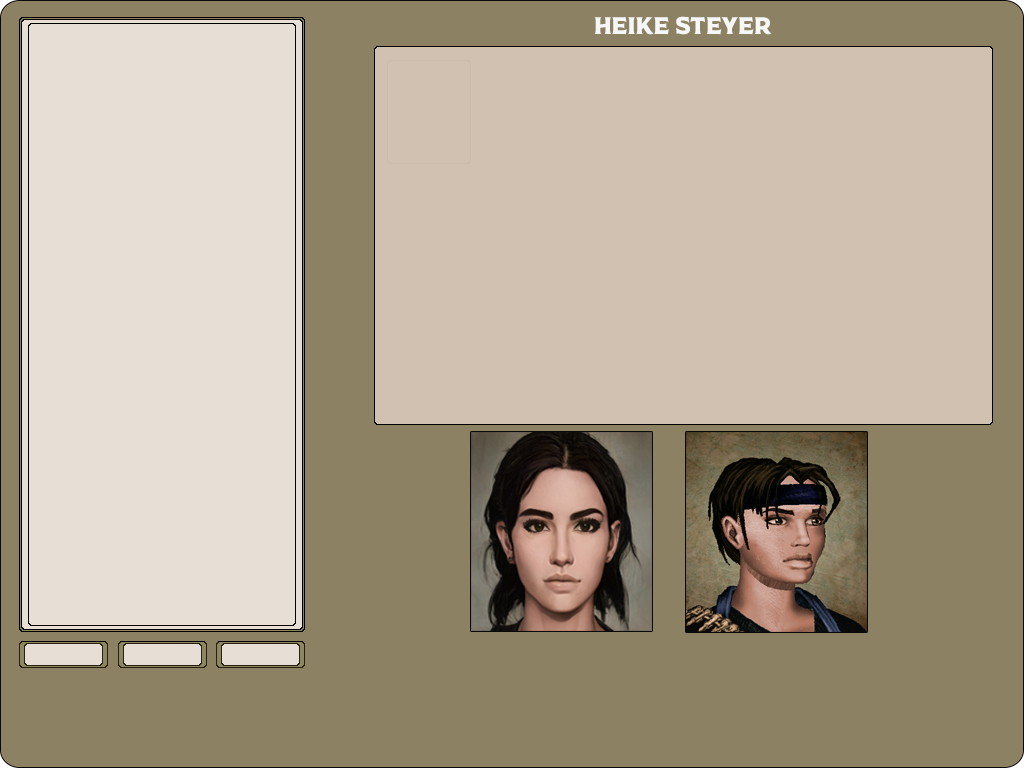
<style>
.page{position:relative;width:1024px;height:768px;background:#8c8263}
.page>*{position:absolute;margin:0}
.t1{font:24px "Rodfat-Two-Demo";color:#f7f7f7}
</style>
<div class="page">
<p class="t1" style="left:594px;top:16px;width:178px;height:19px">Heike steyer</p>
</div>
